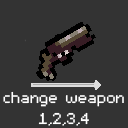
<style>
.page{position:relative;width:128px;height:128px;background:#333333}
.page>*{position:absolute;margin:0}
.t1{font:25px/20.8px "m5x7";color:#ffffff}
</style>
<div class="page">
<p class="t1" style="left:3px;top:91px;width:121px;height:35px;text-align:center">change weapon<br>1,2,3,4</p>
</div>
